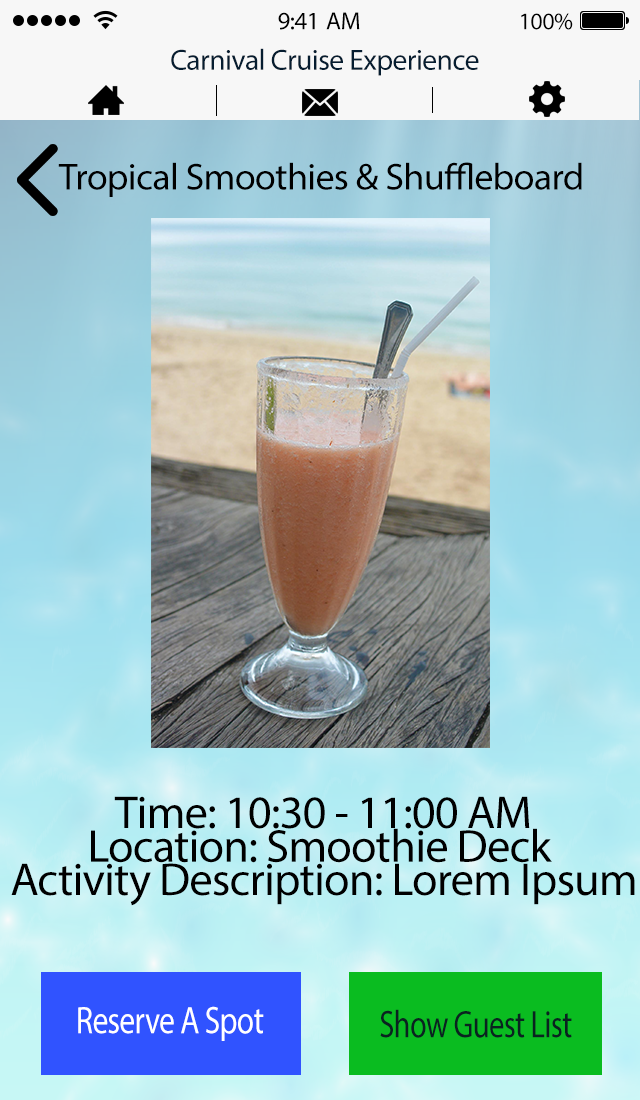
<style>
.page{position:relative;width:640px;height:1100px}
.page>*{position:absolute;margin:0}
.t1{font:25px "MyriadPro-Regular";letter-spacing:-0.02em;color:#000000}
.t2{font:24px "MyriadPro-Regular";letter-spacing:-0.02em;color:#000000}
.t3{font:29.4px "MyriadPro-Regular";letter-spacing:-0.02em;color:#061d30}
.t4{font:37.7px "MyriadPro-Regular";letter-spacing:-0.02em;color:#000000}
.t5{font:46.4px "MyriadPro-Regular";letter-spacing:-0.02em;color:#000000}
.t6{font:38.6px "MyriadPro-Regular";letter-spacing:-0.02em;color:#ffffff;scale:0.81 1}
.t7{font:38.6px "MyriadPro-Regular";letter-spacing:-0.02em;color:#0a2320;scale:0.79 1}
</style>
<div class="page">
<p class="t1" style="left:278px;top:12px;width:82px;height:18px">9:41 AM</p>
<p class="t2" style="left:521px;top:13px;width:52px;height:17px">100%</p>
<p class="t3" style="left:171px;top:48px;width:308px;height:28px">Carnival Cruise Experience</p>
<p class="t4" style="left:58px;top:162px;width:524px;height:35px">Tropical Smoothies &amp; Shuffleboard</p>
<p class="t5" style="left:114px;top:796px;width:416px;height:33px">Time: 10:30 - 11:00 AM</p>
<p class="t5" style="left:91px;top:828px;width:461px;height:35px">Location: Smoothie Deck</p>
<p class="t5" style="left:11px;top:863px;width:624px;height:43px">Activity Description: Lorem Ipsum</p>
<p class="t6" style="left:78px;top:1006px;width:186px;height:35px">Reserve A Spot</p>
<p class="t7" style="left:380px;top:1009px;width:192px;height:29px">Show Guest List</p>
</div>
